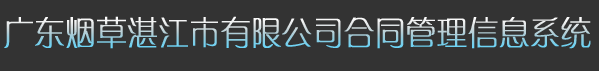
<style>
.page{position:relative;width:599px;height:71px;background:#333333}
.page>*{position:absolute;margin:0}
.t1{font:33px "FZXQJW--GB1-0";letter-spacing:0.005em;font-weight:bold;scale:0.91 1}
</style>
<div class="page">
<p class="t1" style="left:4px;top:16px;width:587px;height:33px">广东烟草湛江市有限公司合同管理信息系统</p>
</div>
